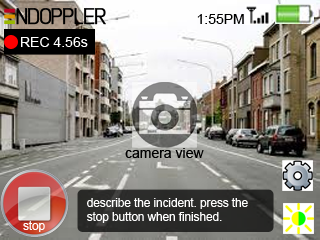
<style>
.page{position:relative;width:320px;height:240px}
.page>*{position:absolute;margin:0}
.t1{font:37.5px "Lintel";letter-spacing:-0.05em;color:#000000;font-variant:small-caps;font-weight:bold}
.t2{font:37.5px "Lintel";color:#ffffff;font-variant:small-caps}
.t3{font:24px "ArialMT";color:#000000}
.t4{font:24px "ArialMT";color:#ffffff}
.t5{font:20px "ArialMT";color:#ffffff}
</style>
<div class="page">
<p class="t1" style="left:16px;top:8px;width:90px;height:17px"><span class="t2">  </span>NDOPPLER</p>
<p class="t3" style="left:197px;top:14px;width:47px;height:10px">1:55PM</p>
<p class="t4" style="left:21px;top:37px;width:67px;height:10px">REC 4.56s</p>
<p class="t3" style="left:125px;top:148px;width:79px;height:10px">camera view</p>
<p class="t5" style="left:87px;top:198px;width:161px;height:25px">describe the incident. press the stop button when finished.</p>
<p class="t5" style="left:23px;top:221px;width:22px;height:11px">stop</p>
</div>
